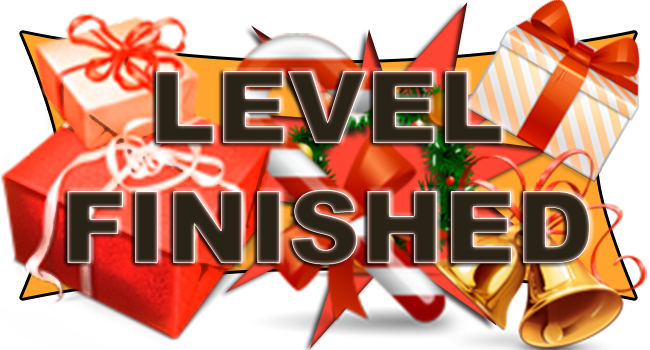
<style>
.page{position:relative;width:650px;height:350px;background:#ffffff}
.page>*{position:absolute;margin:0}
.t1{font:100px "Arial-Black";color:#292216}
</style>
<div class="page">
<p class="t1" style="left:67px;top:71px;width:523px;height:194px;text-align:center">LEVEL<br>FINISHED</p>
</div>
